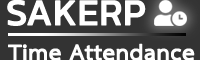
<style>
.page{position:relative;width:200px;height:60px;background:#333333}
.page>*{position:absolute;margin:0}
.t1{font:37.5px "Kanit-Regular";color:#ffffff;font-weight:bold}
.t2{font:31.2px "THSarabunPSK-Bold";color:#ffffff;font-weight:bold}
</style>
<div class="page">
<p class="t1" style="left:7px;top:0px;width:139px;height:26px">SAKERP</p>
<p class="t2" style="left:8px;top:43px;width:187px;height:18px">Time Attendance</p>
</div>
